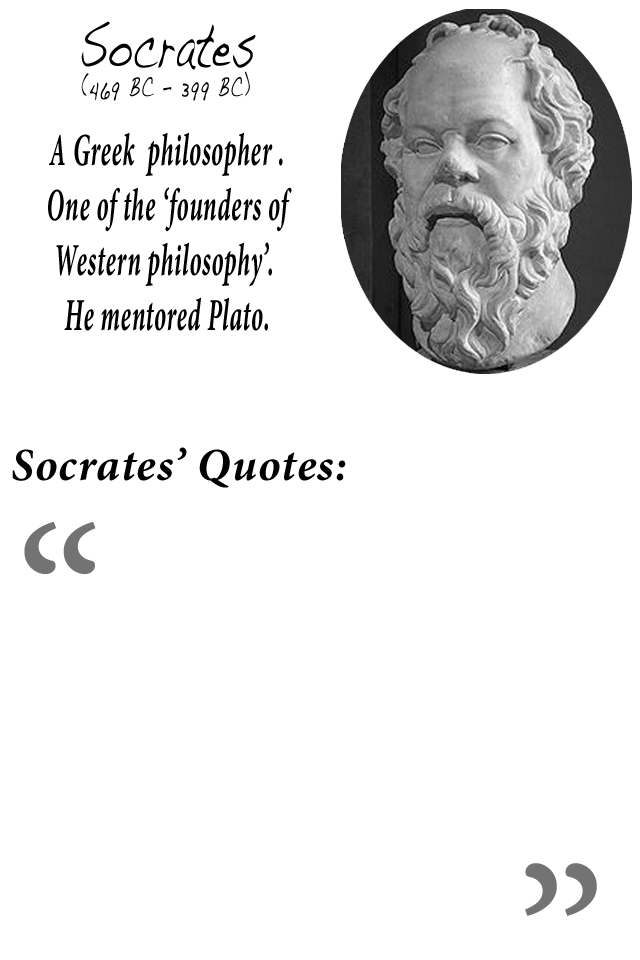
<style>
.page{position:relative;width:640px;height:960px;background:#ffffff}
.page>*{position:absolute;margin:0}
.t1{font:63.7px "Handwriting-Dakota";letter-spacing:0.03em;color:#000000;scale:0.59 1}
.t2{font:29.2px "Handwriting-Dakota";letter-spacing:0.03em;color:#000000;scale:0.63 1}
.t3{font:45.8px "MinionPro-BoldIt";letter-spacing:0.03em;color:#000000;scale:0.53 1}
.t4{font:45.8px "MinionPro-BoldIt";letter-spacing:0.03em;color:#000000}
.t5{font:225px "MinionPro-Regular";letter-spacing:0.03em;color:#737373}
</style>
<div class="page">
<p class="t1" style="left:81px;top:21px;width:175px;height:49px">Socrates</p>
<p class="t2" style="left:81px;top:71px;width:169px;height:30px">(469 BC – 399 BC)</p>
<p class="t3" style="left:48px;top:132px;width:244px;height:199px;text-align:center">A Greek  philosopher .<br>One of the ‘founders of<br>Western philosophy’. <br>He mentored Plato.</p>
<p class="t4" style="left:12px;top:447px;width:334px;height:41px">Socrates’ Quotes:</p>
<p class="t5" style="left:24px;top:522px;width:72px;height:52px">“</p>
<p class="t5" style="left:525px;top:863px;width:72px;height:53px">”</p>
</div>
